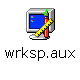
<style>
.page{position:relative;width:80px;height:80px;background:#ffffff}
.page>*{position:absolute;margin:0}
.t1{font:14px "MSReferenceSansSerif";color:#000000}
</style>
<div class="page">
<p class="t1" style="left:5px;top:47px;width:70px;height:14px">wrksp.aux</p>
</div>
